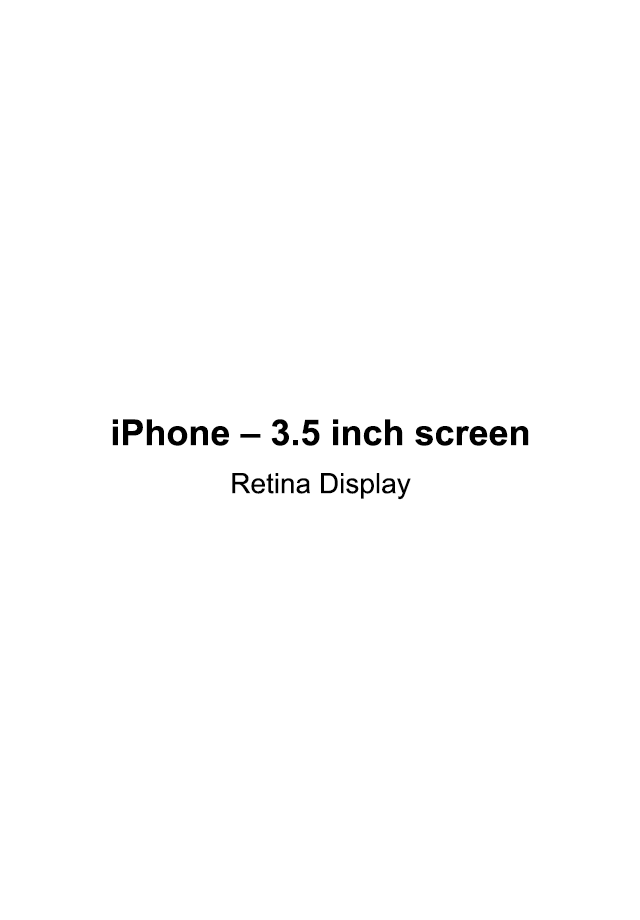
<style>
.page{position:relative;width:640px;height:920px;background:#ffffff}
.page>*{position:absolute;margin:0}
.t1{font:36px/48px "Arial-BoldMT";color:#000000}
.t2{font:28px/48px "ArialMT";color:#000000}
</style>
<div class="page">
<p class="t1" style="left:112px;top:419px;width:417px;height:81px;text-align:center">iPhone – 3.5 inch screen<br><span class="t2">Retina Display</span></p>
</div>
